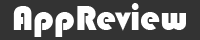
<style>
.page{position:relative;width:200px;height:40px;background:#333333}
.page>*{position:absolute;margin:0}
.t1{font:36px "Bauhaus93";color:#ffffff}
</style>
<div class="page">
<p class="t1" style="left:13px;top:3px;width:173px;height:34px">AppReview</p>
</div>
